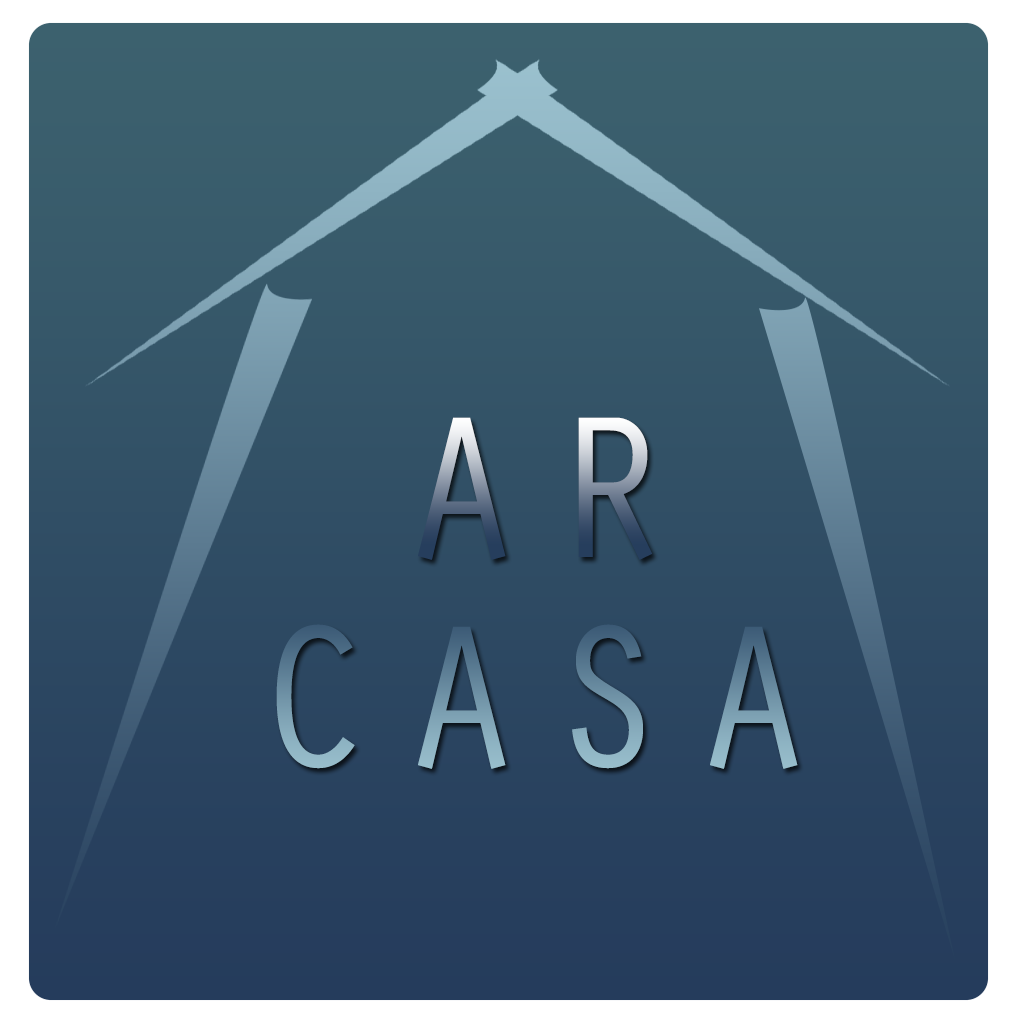
<style>
.page{position:relative;width:1024px;height:1024px}
.page>*{position:absolute;margin:0}
.t1{font:208.7px/104.4px "OratorStd";letter-spacing:0.1em}
</style>
<div class="page">
<p class="t1" style="left:276px;top:417px;width:522px;height:352px;text-align:center">AR<br><br>CASA</p>
</div>
